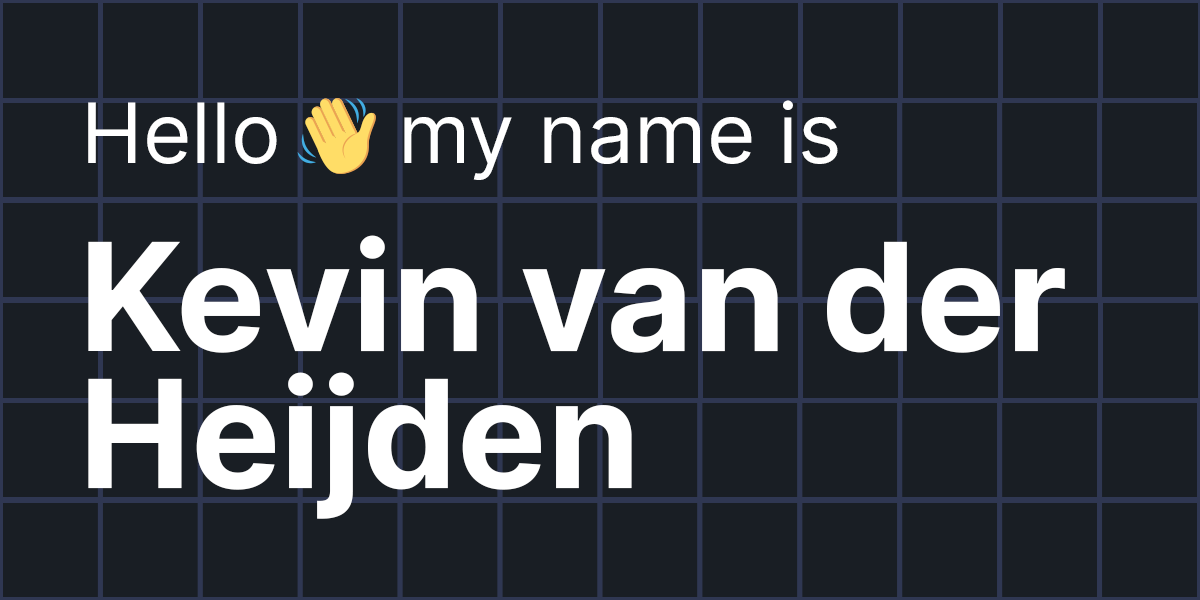
<style>
.page{position:relative;width:1200px;height:600px;background:#191e24}
.page>*{position:absolute;margin:0}
.t1{font:83.3px "Inter-Regular";color:#ffffff}
.t2{font:150px/137.5px "Inter-Bold";color:#ffffff}
</style>
<div class="page">
<p class="t1" style="left:88px;top:100px;width:750px;height:80px">Hello     my name is</p>
<p class="t2" style="left:88px;top:235px;width:977px;height:284px">Kevin van der <br>Heijden</p>
</div>
